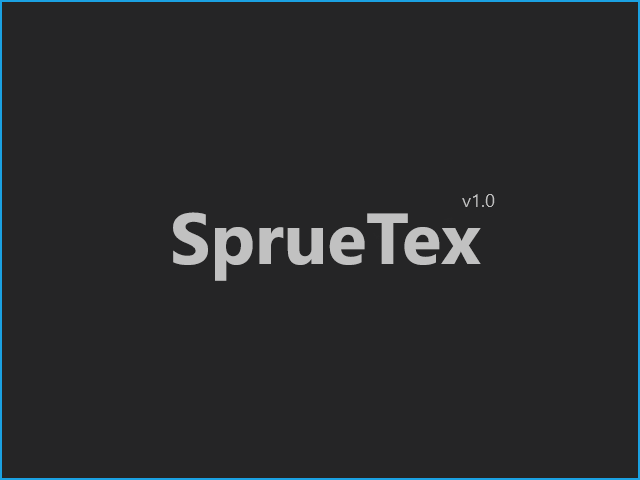
<style>
.page{position:relative;width:640px;height:480px;background:#252526}
.page>*{position:absolute;margin:0}
.t1{font:72px "SegoeUI-Bold";color:#c1c1c1}
</style>
<div class="page">
<p class="t1" style="left:173px;top:212px;width:308px;height:69px">SprueTex</p>
</div>
